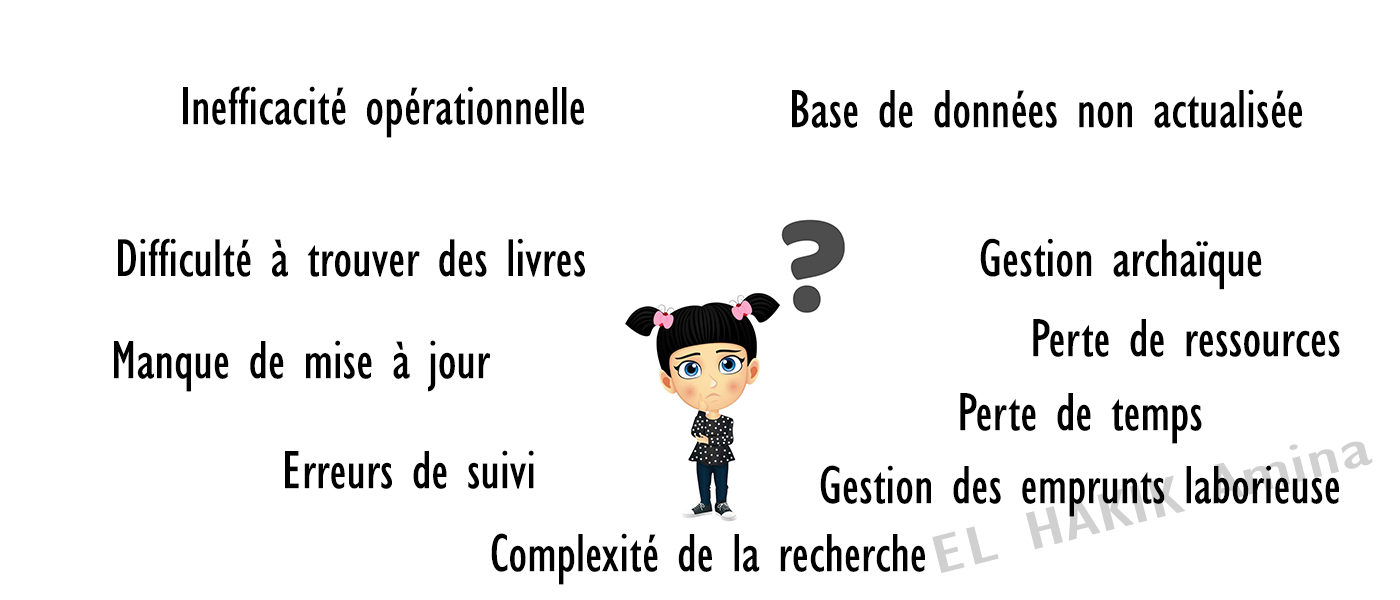
<style>
.page{position:relative;width:1400px;height:600px;background:#ffffff}
.page>*{position:absolute;margin:0}
.t1{font:55.3px "GillSansMT-Condensed";color:#000000}
.t2{font:55px "GillSansMT-Condensed";color:#000000}
</style>
<div class="page">
<p class="t1" style="left:183px;top:86px;width:401px;height:52px">Inefficacité opérationnelle</p>
<p class="t1" style="left:792px;top:89px;width:510px;height:39px">Base de données non actualisée</p>
<p class="t2" style="left:118px;top:238px;width:467px;height:39px">Difficulté à trouver des livres</p>
<p class="t2" style="left:980px;top:238px;width:282px;height:52px">Gestion archaïque</p>
<p class="t1" style="left:1033px;top:319px;width:307px;height:38px">Perte de ressources</p>
<p class="t1" style="left:114px;top:340px;width:376px;height:52px">Manque de mise à jour</p>
<p class="t1" style="left:960px;top:393px;width:242px;height:51px">Perte de temps</p>
<p class="t1" style="left:285px;top:450px;width:249px;height:39px">Erreurs de suivi</p>
<p class="t1" style="left:820px;top:465px;width:519px;height:52px">Gestion des emprunts laborieuse</p>
<p class="t1" style="left:491px;top:533px;width:434px;height:52px">Complexité de la recherche</p>
</div>
